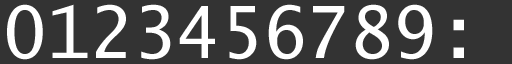
<style>
.page{position:relative;width:512px;height:64px;background:#333333}
.page>*{position:absolute;margin:0}
.t1{font:72px "LucidaConsole";color:#ffffff}
</style>
<div class="page">
<p class="t1" style="left:7px;top:4px;width:457px;height:56px">0123456789:</p>
</div>
